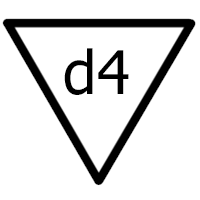
<style>
.page{position:relative;width:200px;height:200px;background:#ffffff}
.page>*{position:absolute;margin:0}
.t1{font:60px "Tahoma";color:#000000}
</style>
<div class="page">
<p class="t1" style="left:64px;top:48px;width:65px;height:47px">d4</p>
</div>
